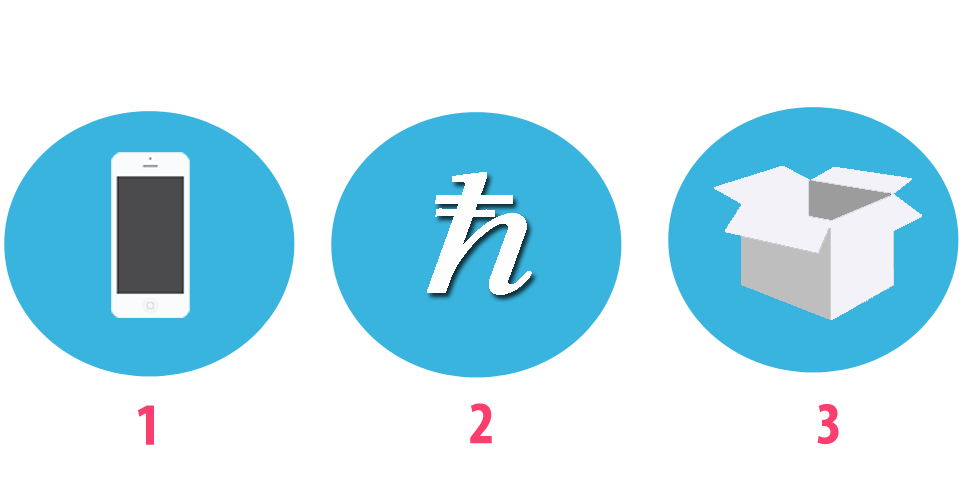
<style>
.page{position:relative;width:978px;height:500px;background:#ffffff}
.page>*{position:absolute;margin:0}
.t1{font:60px "MyriadPro-BoldCond";color:#fa3e6e}
</style>
<div class="page">
<p class="t1" style="left:138px;top:405px;width:16px;height:40px">1</p>
<p class="t1" style="left:470px;top:403px;width:22px;height:41px">2</p>
<p class="t1" style="left:817px;top:404px;width:22px;height:41px">3</p>
</div>
